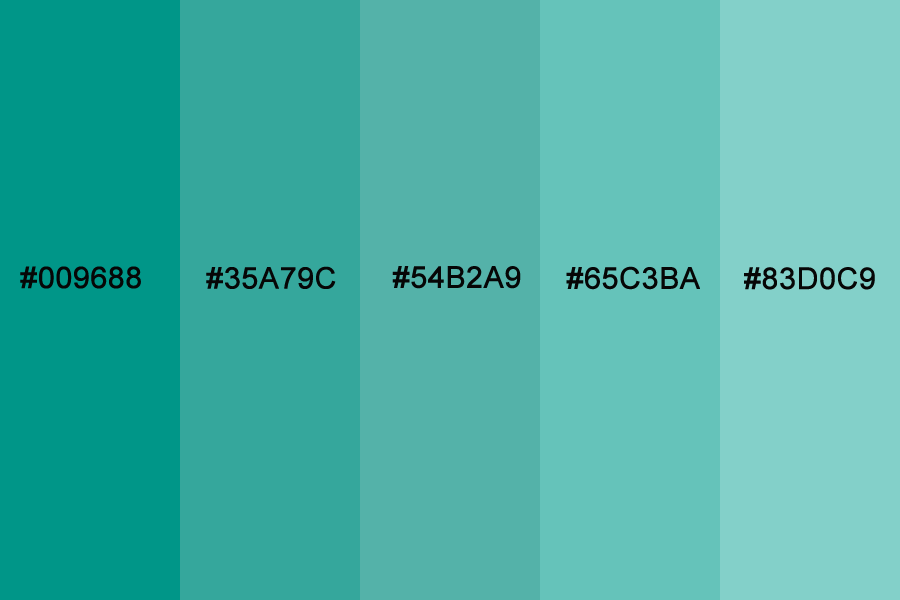
<style>
.page{position:relative;width:900px;height:600px}
.page>*{position:absolute;margin:0}
.t1{font:30px "ArialMT";color:#060606;text-transform:uppercase;font-weight:bold}
</style>
<div class="page">
<p class="t1" style="left:20px;top:266px;width:121px;height:23px">#009688</p>
<p class="t1" style="left:206px;top:266px;width:130px;height:23px">#35a79c</p>
<p class="t1" style="left:392px;top:266px;width:129px;height:23px">#54b2a9</p>
<p class="t1" style="left:566px;top:266px;width:134px;height:24px">#65c3ba</p>
<p class="t1" style="left:744px;top:267px;width:131px;height:23px">#83d0c9</p>
</div>
